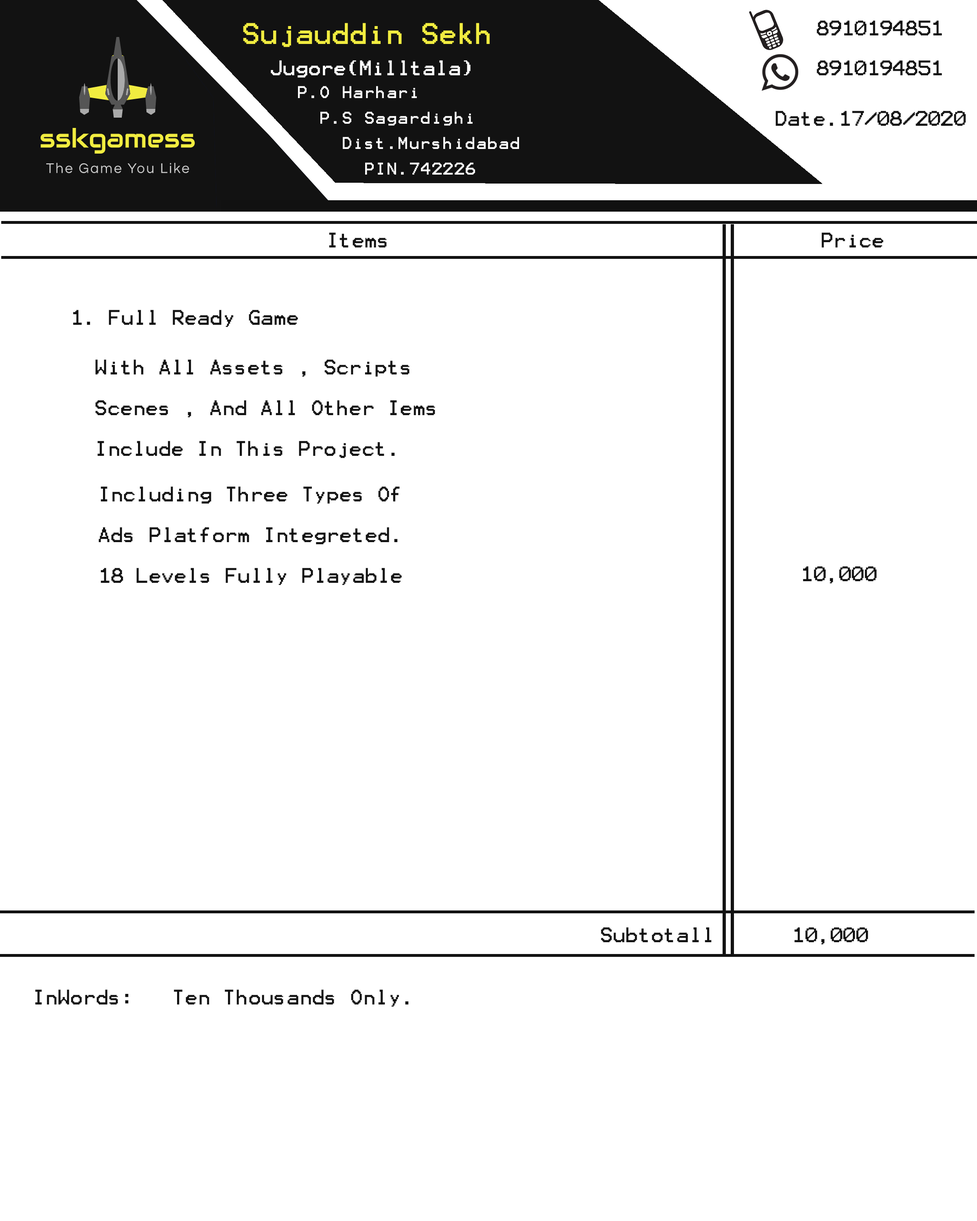
<style>
.page{position:relative;width:977px;height:1221px;background:#ffffff}
.page>*{position:absolute;margin:0}
.t1{font:5.7px "Terminal";color:#f1ec40}
.t2{font:17px "Terminal";color:#121212}
.t3{font:17px "Terminal";color:#ffffff}
.t4{font:13.6px/25.4px "Terminal";letter-spacing:0.075em;color:#ffffff}
</style>
<div class="page">
<p class="t1" style="left:243px;top:23px;width:247px;height:24px">Sujauddin Sekh</p>
<p class="t2" style="left:816px;top:20px;width:126px;height:15px">8910194851</p>
<p class="t3" style="left:271px;top:60px;width:199px;height:18px">Jugore(Milltala)</p>
<p class="t2" style="left:816px;top:60px;width:126px;height:15px">8910194851</p>
<p class="t4" style="left:298px;top:86px;width:221px;height:89px">P.O Harhari<br>  P.S Sagardighi<br>    Dist.Murshidabad<br>      PIN.742226</p>
<p class="t2" style="left:775px;top:111px;width:191px;height:15px">Date.17/08/2020</p>
<p class="t2" style="left:329px;top:232px;width:58px;height:15px">Items</p>
<p class="t2" style="left:821px;top:232px;width:62px;height:15px">Price</p>
<p class="t2" style="left:73px;top:310px;width:225px;height:17px">1. Full Ready Game</p>
<p class="t2" style="left:95px;top:359px;width:340px;height:99px">With All Assets , Scripts<br><br>Scenes , And All Other Iems<br><br>Include In This Project.</p>
<p class="t2" style="left:98px;top:486px;width:304px;height:99px">Including Three Types Of<br><br>Ads Platform Integreted.<br><br>18 Levels Fully Playable</p>
<p class="t2" style="left:803px;top:566px;width:74px;height:18px">10,000</p>
<p class="t2" style="left:601px;top:927px;width:110px;height:15px">Subtotall</p>
<p class="t2" style="left:794px;top:927px;width:74px;height:18px">10,000</p>
<p class="t2" style="left:35px;top:989px;width:374px;height:18px">InWords:   Ten Thousands Only.</p>
</div>
